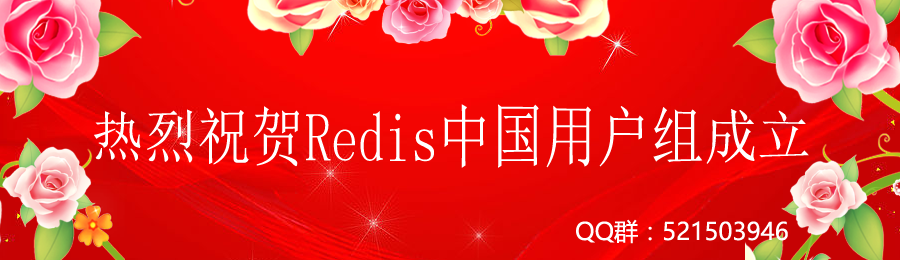
<style>
.page{position:relative;width:900px;height:260px}
.page>*{position:absolute;margin:0}
.t1{font:53.3px "NSimSun";color:#ffffff}
.t2{font:24px "MicrosoftYaHei";color:#ffffff}
</style>
<div class="page">
<p class="t1" style="left:94px;top:104px;width:715px;height:64px">热烈祝贺Redis中国用户组成立</p>
<p class="t2" style="left:576px;top:219px;width:212px;height:25px">QQ群：521503946</p>
</div>
